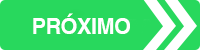
<style>
.page{position:relative;width:200px;height:50px;background:#28d85d}
.page>*{position:absolute;margin:0}
.t1{font:21.7px "Helvetica-Bold";letter-spacing:-0.025em;color:#ffffff}
</style>
<div class="page">
<p class="t1" style="left:33px;top:13px;width:97px;height:21px">PRÓXIMO</p>
</div>
